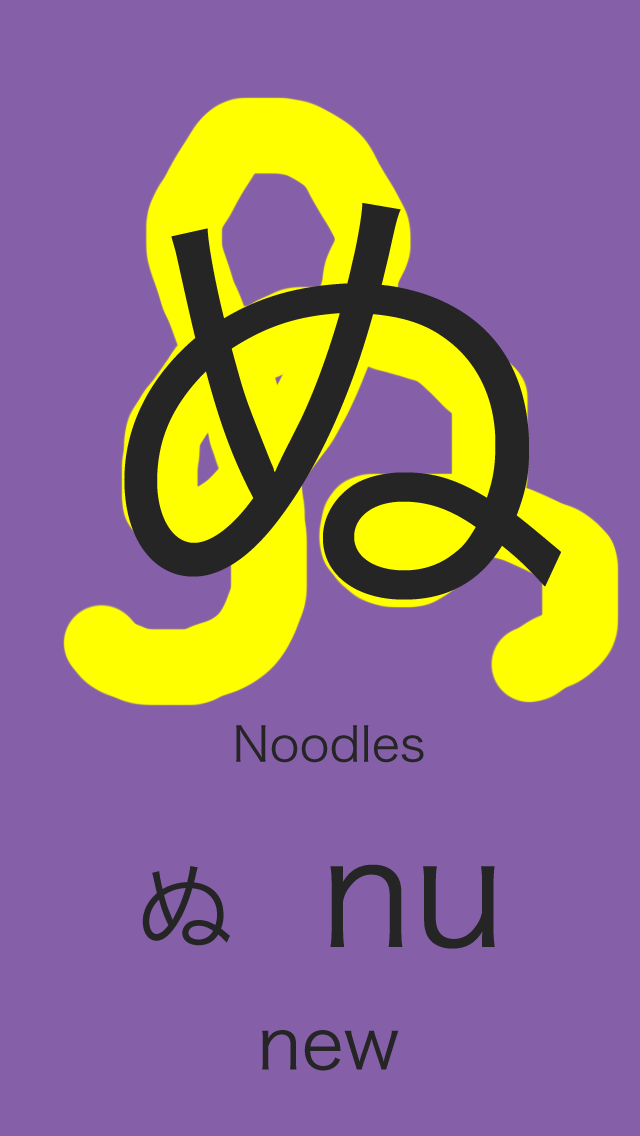
<style>
.page{position:relative;width:640px;height:1136px;background:#8560a9}
.page>*{position:absolute;margin:0}
.t1{font:500px "HiraKakuPro-W3";color:#252525}
.t2{font:48px "HiraKakuPro-W3";color:#252525}
.t3{font:100px "HiraKakuPro-W3";color:#252525}
.t4{font:150px "HiraKakuPro-W3";color:#252525}
.t5{font:72px "HiraKakuPro-W3";color:#252525}
</style>
<div class="page">
<p class="t1" style="left:124px;top:203px;width:437px;height:397px">ぬ</p>
<p class="t2" style="left:236px;top:725px;width:188px;height:38px">Noodles</p>
<p class="t3" style="left:142px;top:866px;width:88px;height:80px">ぬ</p>
<p class="t4" style="left:330px;top:864px;width:165px;height:85px">nu</p>
<p class="t5" style="left:262px;top:1030px;width:137px;height:41px">new</p>
</div>
